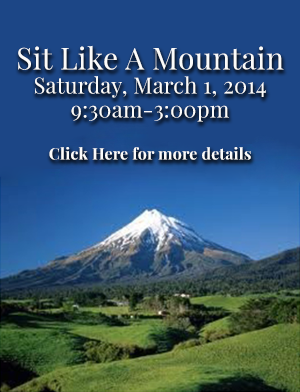
<style>
.page{position:relative;width:300px;height:392px;background:#1c4686}
.page>*{position:absolute;margin:0}
.t1{font:22px/24px "PlayfairDisplay-Regular";letter-spacing:0.01em;color:#fbfbfa}
.t2{font:30px/14px "PlayfairDisplay-Regular";letter-spacing:0.01em;color:#fbfbfa}
.t3{font:16px/18px "PlayfairDisplay-Bold";letter-spacing:0.01em;color:#fbfbfa}
</style>
<div class="page">
<p class="t1" style="left:18px;top:45px;width:266px;height:115px;text-align:center"><span class="t2">Sit Like A Mountain<br></span>Saturday, March 1, 2014<br>9:30am-3:00pm<br><br><span class="t3">Click Here for more details</span></p>
</div>
